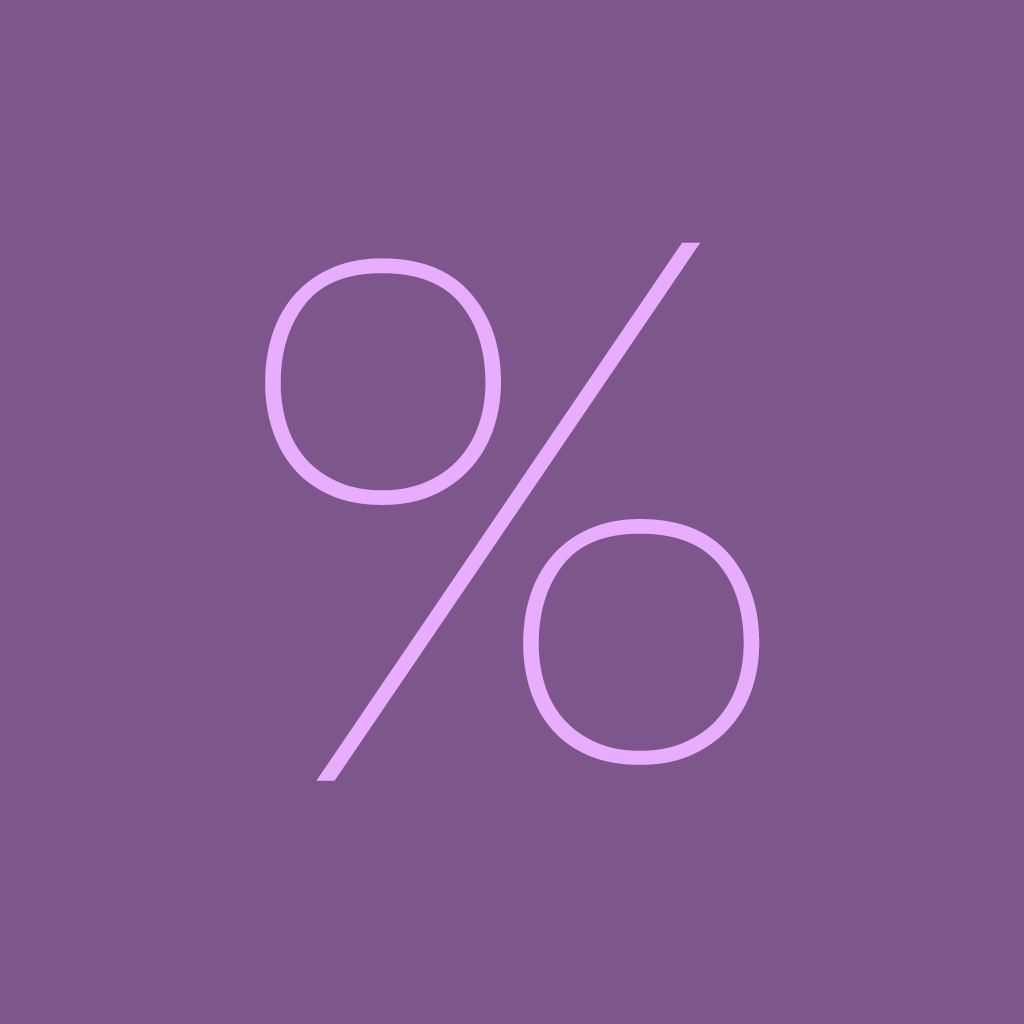
<style>
.page{position:relative;width:1024px;height:1024px;background:#7d578c}
.page>*{position:absolute;margin:0}
.t1{font:720px "HelveticaNeue-UltraLight";letter-spacing:0.06em;color:#e9adff;scale:1.07 1}
</style>
<div class="page">
<p class="t1" style="left:265px;top:242px;width:495px;height:539px">%</p>
</div>
